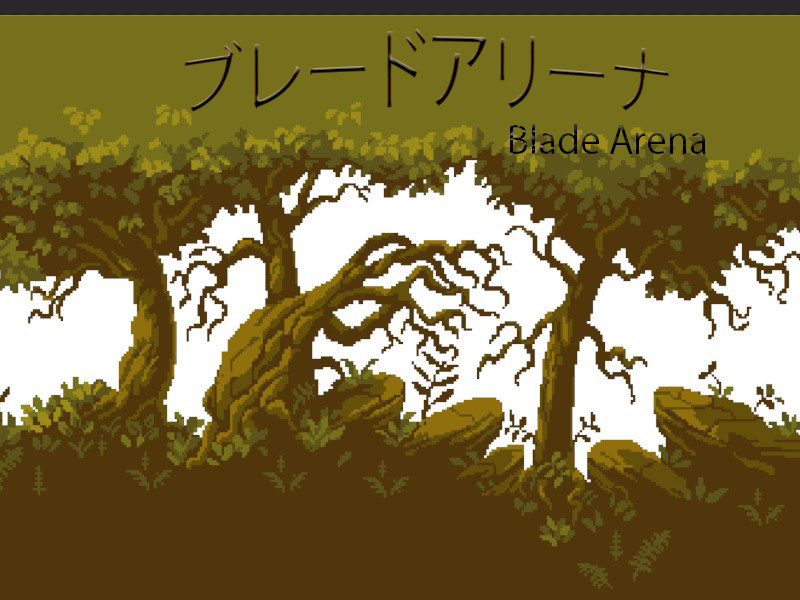
<style>
.page{position:relative;width:800px;height:600px}
.page>*{position:absolute;margin:0}
.t1{font:66.7px "KozGoPr6N-Regular"}
.t2{font:37.5px "KozGoPr6N-Regular";color:#000000}
</style>
<div class="page">
<p class="t1" style="left:184px;top:28px;width:485px;height:84px">ブレードアリーナ</p>
<p class="t2" style="left:510px;top:124px;width:196px;height:30px">Blade Arena</p>
</div>
